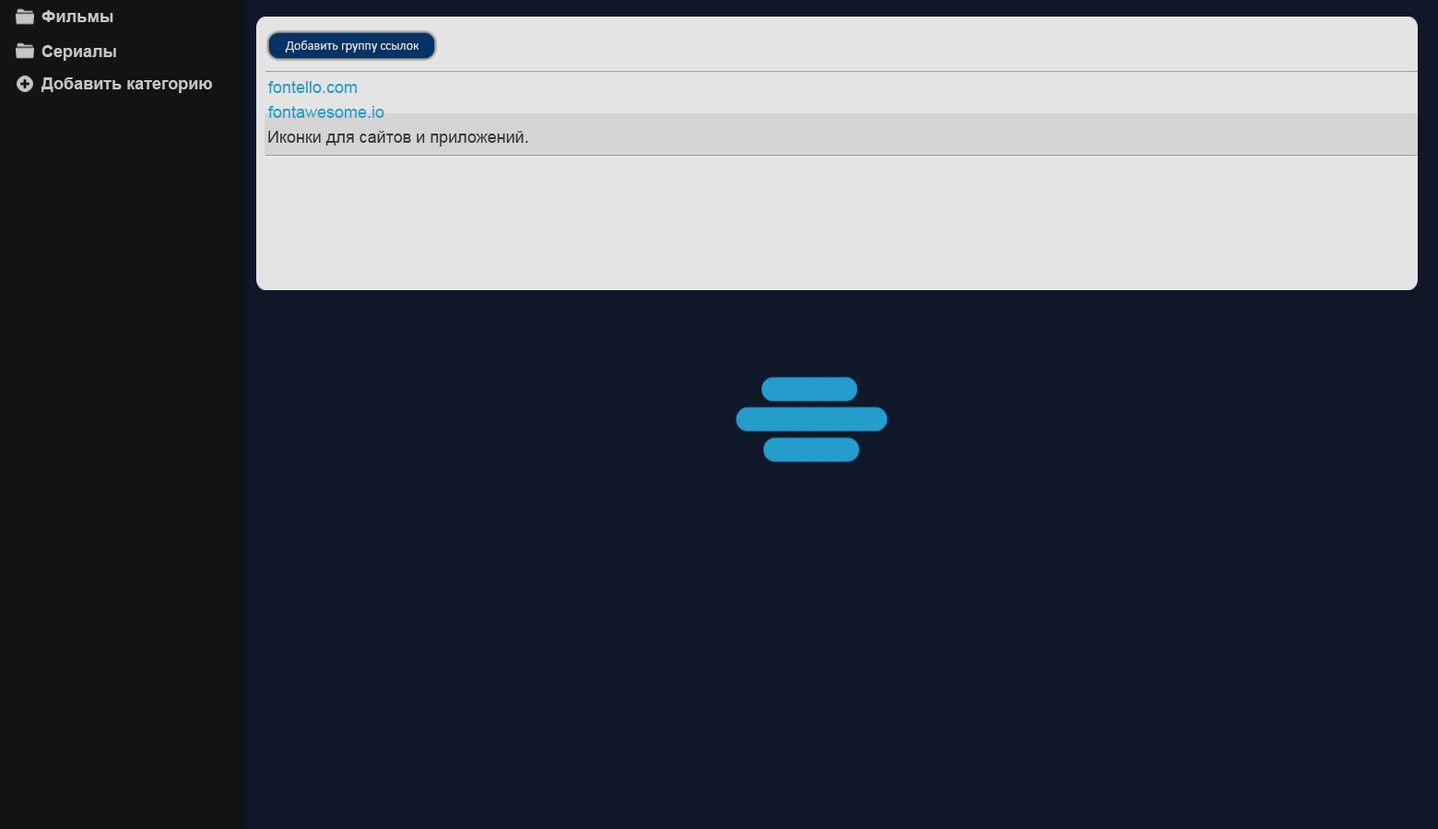
<style>
.page{position:relative;width:1438px;height:829px;background:#0f1828}
.page>*{position:absolute;margin:0}
.t1{font:16.6px "Arial-BoldMT";color:#c5c5c5}
.t2{font:12.9px "Calibri";color:#e4e4e4}
.t3{font:16.6px "ArialMT";color:#249dcd}
.t4{font:16.6px "ArialMT";color:#383838}
</style>
<div class="page">
<p class="t1" style="left:41px;top:10px;width:72px;height:12px">Фильмы</p>
<p class="t2" style="left:285px;top:41px;width:134px;height:12px">Добавить группу ссылок</p>
<p class="t1" style="left:41px;top:45px;width:75px;height:16px">Сериалы</p>
<p class="t1" style="left:41px;top:77px;width:171px;height:16px">Добавить категорию</p>
<p class="t3" style="left:268px;top:81px;width:89px;height:12px">fontello.com</p>
<p class="t3" style="left:268px;top:106px;width:116px;height:12px">fontawesome.io</p>
<p class="t4" style="left:268px;top:131px;width:260px;height:16px">Иконки для сайтов и приложений.</p>
</div>
